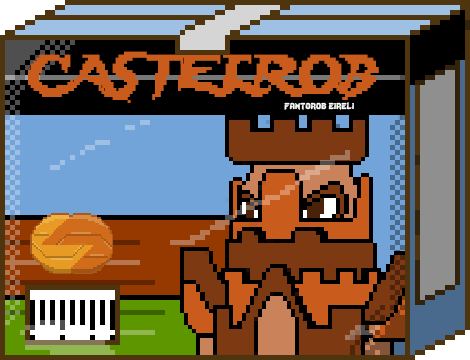
<style>
.page{position:relative;width:470px;height:360px}
.page>*{position:absolute;margin:0}
.t1{font:48.3px "Lady-Radical";color:#c95c1c;scale:0.93 1}
.t2{font:12px "Lady-Radical";color:#fbfbfb}
</style>
<div class="page">
<p class="t1" style="left:28px;top:51px;width:351px;height:52px">CASTELROB</p>
<p class="t2" style="left:284px;top:102px;width:70px;height:8px">fantorob eireli</p>
</div>
